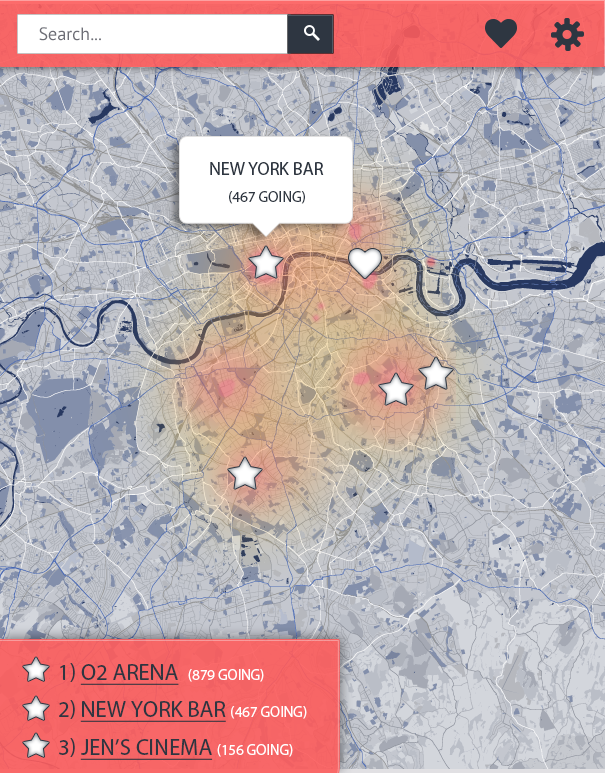
<style>
.page{position:relative;width:605px;height:773px}
.page>*{position:absolute;margin:0}
.t1{font:18px "PTSans-Regular";color:#6d6e76}
.t2{font:18px "MyriadPro-Regular";color:#2e3641;text-transform:uppercase}
.t3{font:15px "MyriadPro-Regular";color:#2e3641;text-transform:uppercase}
.t4{font:15px "MyriadPro-Regular";color:#ffffff;text-transform:uppercase}
.t5{font:23px "MyriadPro-Regular";color:#2e3641;text-transform:uppercase}
.t6{font:23px "MyriadPro-Regular";color:#2e3641;text-transform:uppercase;text-decoration:underline}
</style>
<div class="page">
<p class="t1" style="left:39px;top:27px;width:62px;height:14px">Search...</p>
<p class="t2" style="left:210px;top:162px;width:114px;height:13px">New York Bar</p>
<p class="t3" style="left:229px;top:191px;width:76px;height:13px">(467 going)</p>
<p class="t4" style="left:60px;top:663px;width:204px;height:22px"><span class="t5">1) </span><span class="t6">o2 arena  </span>(879 going)</p>
<p class="t6" style="left:59px;top:700px;width:248px;height:22px"><span class="t5">2) </span>New york bar <span class="t4">(467 going)</span></p>
<p class="t6" style="left:59px;top:738px;width:234px;height:22px"><span class="t5">3) </span>Jen’s cinema <span class="t4">(156 going)</span></p>
</div>
